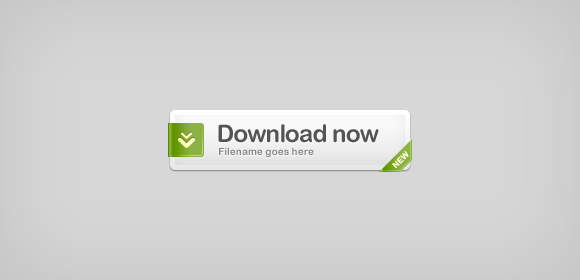
<style>
.page{position:relative;width:580px;height:280px;background:#d7d7d7}
.page>*{position:absolute;margin:0}
.t1{font:24.2px "ArialRoundedMTBold";letter-spacing:-0.025em;color:#545353}
.t2{font:10.1px "ArialRoundedMTBold";color:#868686}
.t3{font:8.1px "ArialRoundedMTBold";color:#ffffd7;text-transform:uppercase}
</style>
<div class="page">
<p class="t1" style="left:218px;top:124px;width:161px;height:19px">Download now</p>
<p class="t2" style="left:219px;top:147px;width:95px;height:10px">Filename goes here</p>
<p class="t3" style="left:392px;top:151px;width:17px;height:17px;rotate:-45deg">new</p>
</div>
